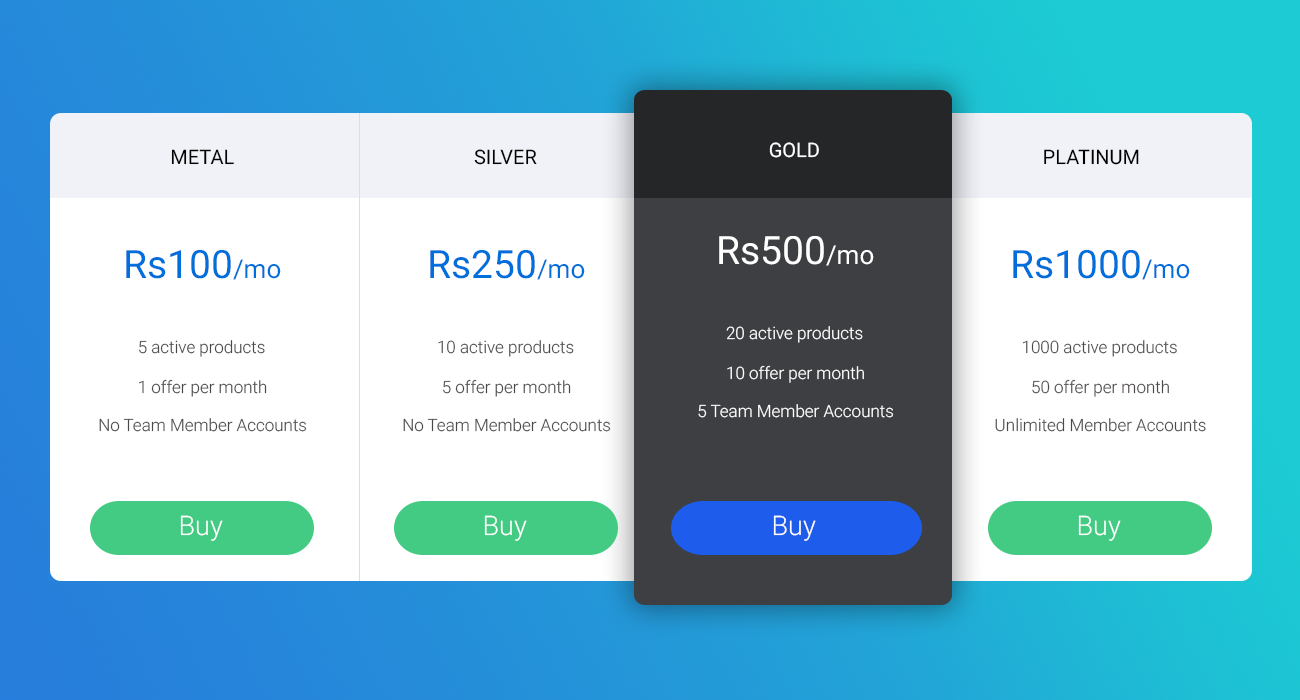
<style>
.page{position:relative;width:1300px;height:700px;background:#ffffff}
.page>*{position:absolute;margin:0}
.t1{font:20px "Roboto-Regular";color:#020202}
.t2{font:20px "Roboto-Regular";color:#ffffff}
.t3{font:20px "Roboto-Regular";color:#000000}
.t4{font:39px "Roboto-Regular";color:#ffffff}
.t5{font:26px "Roboto-Regular";color:#ffffff}
.t6{font:39px "Roboto-Regular";color:#006fdb}
.t7{font:26px "Roboto-Regular";color:#006fdb}
.t8{font:17px "Roboto-Light";color:#ffffff}
.t9{font:17px "Roboto-Light";color:#4c4848}
.t10{font:27px "Roboto-Light";color:#ffffff}
</style>
<div class="page">
<p class="t1" style="left:171px;top:149px;width:63px;height:16px">METAL</p>
<p class="t1" style="left:474px;top:149px;width:63px;height:16px">SILVER</p>
<p class="t2" style="left:769px;top:142px;width:50px;height:16px">GOLD</p>
<p class="t3" style="left:1044px;top:149px;width:95px;height:16px">PLATINUM</p>
<p class="t4" style="left:719px;top:236px;width:155px;height:30px">Rs500<span class="t5">/mo</span></p>
<p class="t6" style="left:126px;top:250px;width:155px;height:30px">Rs100<span class="t7">/mo</span></p>
<p class="t6" style="left:430px;top:250px;width:155px;height:30px">Rs250<span class="t7">/mo</span></p>
<p class="t6" style="left:1013px;top:250px;width:177px;height:30px">Rs1000<span class="t7">/mo</span></p>
<p class="t8" style="left:726px;top:326px;width:137px;height:17px">20 active products</p>
<p class="t9" style="left:139px;top:340px;width:126px;height:17px">5 active products</p>
<p class="t9" style="left:438px;top:340px;width:136px;height:17px">10 active products</p>
<p class="t9" style="left:1022px;top:340px;width:155px;height:17px">1000 active products</p>
<p class="t8" style="left:727px;top:365px;width:137px;height:18px">10 offer per month</p>
<p class="t9" style="left:139px;top:379px;width:128px;height:18px">1 offer per month</p>
<p class="t9" style="left:443px;top:379px;width:128px;height:18px">5 offer per month</p>
<p class="t9" style="left:1032px;top:379px;width:137px;height:18px">50 offer per month</p>
<p class="t8" style="left:698px;top:404px;width:196px;height:14px">5 Team Member Accounts</p>
<p class="t9" style="left:99px;top:418px;width:208px;height:14px">No Team Member Accounts</p>
<p class="t9" style="left:403px;top:418px;width:208px;height:14px">No Team Member Accounts</p>
<p class="t9" style="left:995px;top:418px;width:211px;height:14px">Unlimited Member Accounts</p>
<p class="t10" style="left:180px;top:515px;width:43px;height:26px">Buy</p>
<p class="t10" style="left:484px;top:515px;width:43px;height:26px">Buy</p>
<p class="t10" style="left:773px;top:515px;width:43px;height:26px">Buy</p>
<p class="t10" style="left:1078px;top:515px;width:43px;height:26px">Buy</p>
</div>
